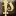
<style>
.page{position:relative;width:16px;height:16px}
.page>*{position:absolute;margin:0}
.t1{font:20px "SaberRegular";letter-spacing:-0.015em;color:#e4da92}
</style>
<div class="page">
<p class="t1" style="left:2px;top:0px;width:12px;height:17px">P</p>
</div>
